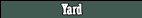
<style>
.page{position:relative;width:142px;height:18px;background:#415a52}
.page>*{position:absolute;margin:0}
.t1{font:14px "Rockwell-Condensed";color:#ffffff;font-weight:bold}
</style>
<div class="page">
<p class="t1" style="left:61px;top:3px;width:21px;height:12px">Yard</p>
</div>
